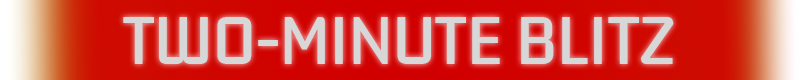
<style>
.page{position:relative;width:800px;height:80px}
.page>*{position:absolute;margin:0}
.t1{font:60px "KdamThmorPro-Regular";color:#d7d7d7}
</style>
<div class="page">
<p class="t1" style="left:123px;top:17px;width:551px;height:47px">TWO-MINUTE BLITZ</p>
</div>
